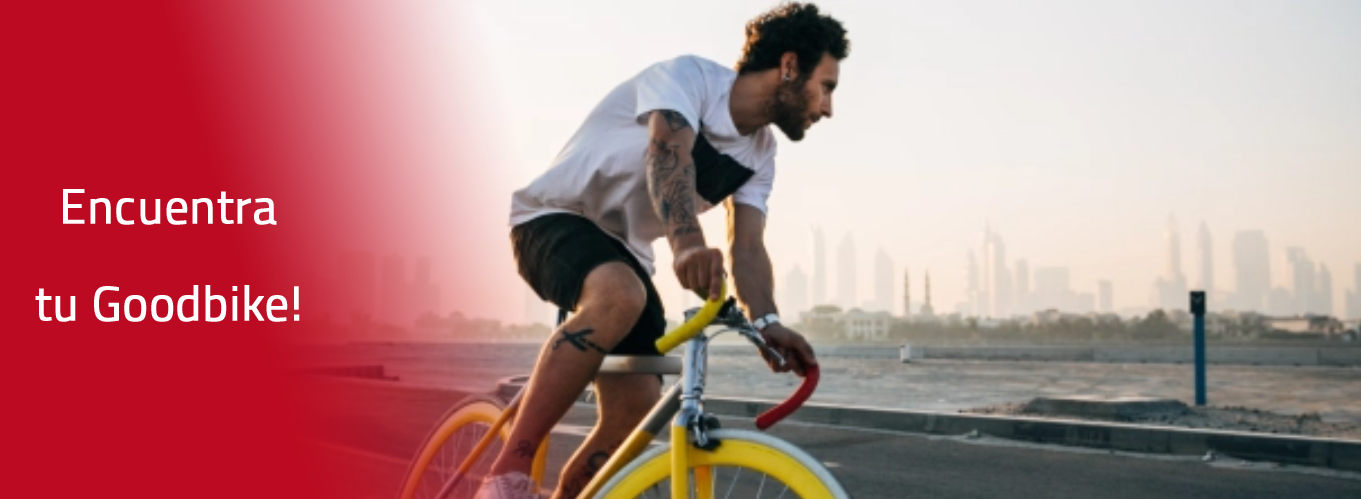
<style>
.page{position:relative;width:1361px;height:499px}
.page>*{position:absolute;margin:0}
.t1{font:48.6px/97.3px "Titillium-Regular";color:#ffffff;font-weight:bold}
</style>
<div class="page">
<p class="t1" style="left:35px;top:189px;width:265px;height:133px;text-align:center">Encuentra<br>tu Goodbike!</p>
</div>
